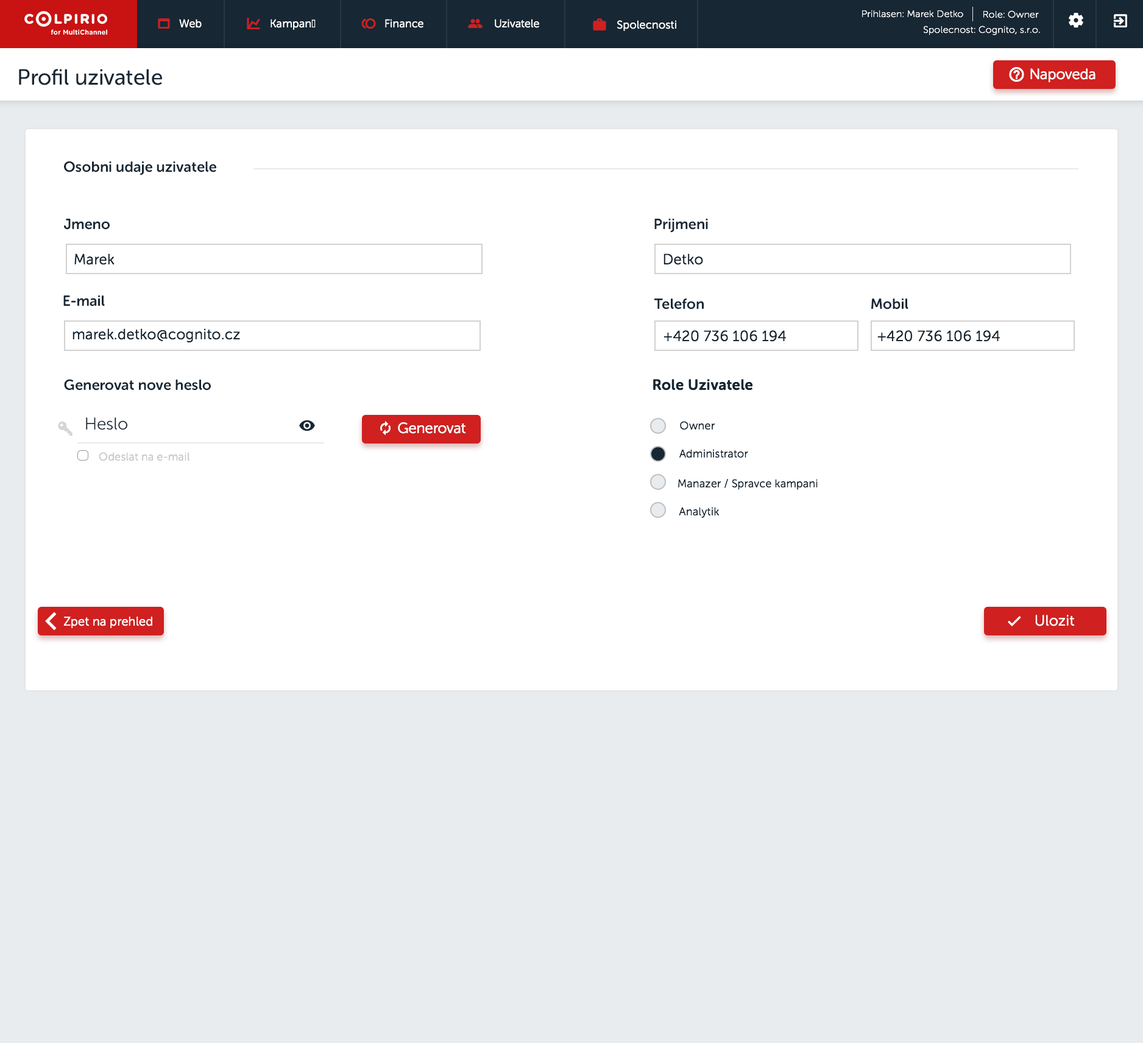
<style>
.page{position:relative;width:1143px;height:1043px;background:#ffffff}
.page>*{position:absolute;margin:0}
.t1{font:9.7px "MuseoSansRounded-100";letter-spacing:0.025em;color:#ffffff}
.t2{font:11px "MuseoSansRounded-300";letter-spacing:0.025em;color:#ffffff}
.t3{font:21.9px "MuseoSansRounded-500";color:#172734}
.t4{font:14.6px "MuseoSansRounded-300";color:#ffffff}
.t5{font:14.6px "MuseoSansRounded-700";color:#172734}
.t6{font:14.6px "MuseoSansRounded-300";letter-spacing:0.025em;color:#172734}
.t7{font:14.6px "MuseoSansRounded-700";letter-spacing:0.025em;color:#172734}
.t8{font:17.1px "MuseoSansRounded-300";color:#172734}
.t9{font:11px "MuseoSansRounded-300";letter-spacing:0.025em;color:#172734}
.t10{font:11px "MuseoSansRounded-300";letter-spacing:0.025em;color:#c9c8c8}
.t11{font:12.2px "MuseoSansRounded-300";letter-spacing:0.025em;color:#ffffff}
.t12{font:14.6px "MuseoSansRounded-300";letter-spacing:0.025em;color:#ffffff}
</style>
<div class="page">
<p class="t1" style="left:862px;top:10px;width:101px;height:8px">Prihlasen: Marek Detko</p>
<p class="t1" style="left:983px;top:10px;width:56px;height:8px">Role: Owner</p>
<p class="t2" style="left:179px;top:19px;width:23px;height:9px">Web</p>
<p class="t2" style="left:271px;top:19px;width:45px;height:11px">Kampaně</p>
<p class="t2" style="left:385px;top:19px;width:38px;height:9px">Finance</p>
<p class="t2" style="left:495px;top:19px;width:44px;height:9px">Uzivatele</p>
<p class="t2" style="left:617px;top:20px;width:59px;height:11px">Spolecnosti</p>
<p class="t1" style="left:924px;top:26px;width:116px;height:9px">Spolecnost: Cognito, s.r.o.</p>
<p class="t3" style="left:19px;top:69px;width:143px;height:16px">Profil uzivatele</p>
<p class="t4" style="left:1030px;top:68px;width:66px;height:14px">Napoveda</p>
<p class="t5" style="left:64px;top:161px;width:152px;height:14px">Osobni udaje uzivatele</p>
<p class="t5" style="left:64px;top:219px;width:46px;height:11px">Jmeno</p>
<p class="t5" style="left:654px;top:219px;width:54px;height:13px">Prijmeni</p>
<p class="t6" style="left:74px;top:253px;width:41px;height:12px">Marek</p>
<p class="t6" style="left:664px;top:253px;width:39px;height:12px">Detko</p>
<p class="t5" style="left:63px;top:296px;width:42px;height:10px">E-mail</p>
<p class="t5" style="left:654px;top:299px;width:50px;height:11px">Telefon</p>
<p class="t5" style="left:871px;top:299px;width:38px;height:11px">Mobil</p>
<p class="t6" style="left:73px;top:328px;width:167px;height:14px">marek.detko@cognito.cz</p>
<p class="t6" style="left:664px;top:330px;width:122px;height:12px">+420 736 106 194</p>
<p class="t6" style="left:877px;top:330px;width:123px;height:12px">+420 736 106 194</p>
<p class="t5" style="left:64px;top:379px;width:147px;height:12px">Generovat nove heslo</p>
<p class="t7" style="left:653px;top:379px;width:100px;height:12px">Role Uzivatele</p>
<p class="t8" style="left:86px;top:417px;width:41px;height:13px">Heslo</p>
<p class="t4" style="left:398px;top:422px;width:68px;height:12px">Generovat</p>
<p class="t9" style="left:680px;top:421px;width:35px;height:9px">Owner</p>
<p class="t9" style="left:679px;top:449px;width:69px;height:9px">Administrator</p>
<p class="t10" style="left:99px;top:452px;width:91px;height:9px">Odeslat na e-mail</p>
<p class="t9" style="left:678px;top:479px;width:140px;height:11px">Manazer / Spravce kampani</p>
<p class="t9" style="left:679px;top:507px;width:41px;height:11px">Analytik</p>
<p class="t11" style="left:63px;top:617px;width:89px;height:11px">Zpet na prehled</p>
<p class="t12" style="left:1035px;top:615px;width:40px;height:11px">Ulozit</p>
</div>
